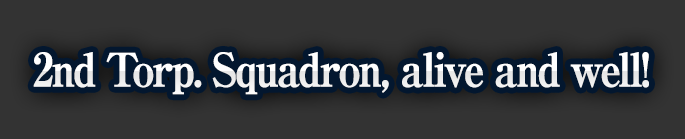
<style>
.page{position:relative;width:685px;height:139px;background:#333333}
.page>*{position:absolute;margin:0}
.t1{font:46px "RyuminPro-ExBold";letter-spacing:-0.08em;color:#ffffff;font-weight:bold;scale:0.9 1}
</style>
<div class="page">
<p class="t1" style="left:33px;top:52px;width:616px;height:43px">2nd Torp. Squadron, alive and well!</p>
</div>
